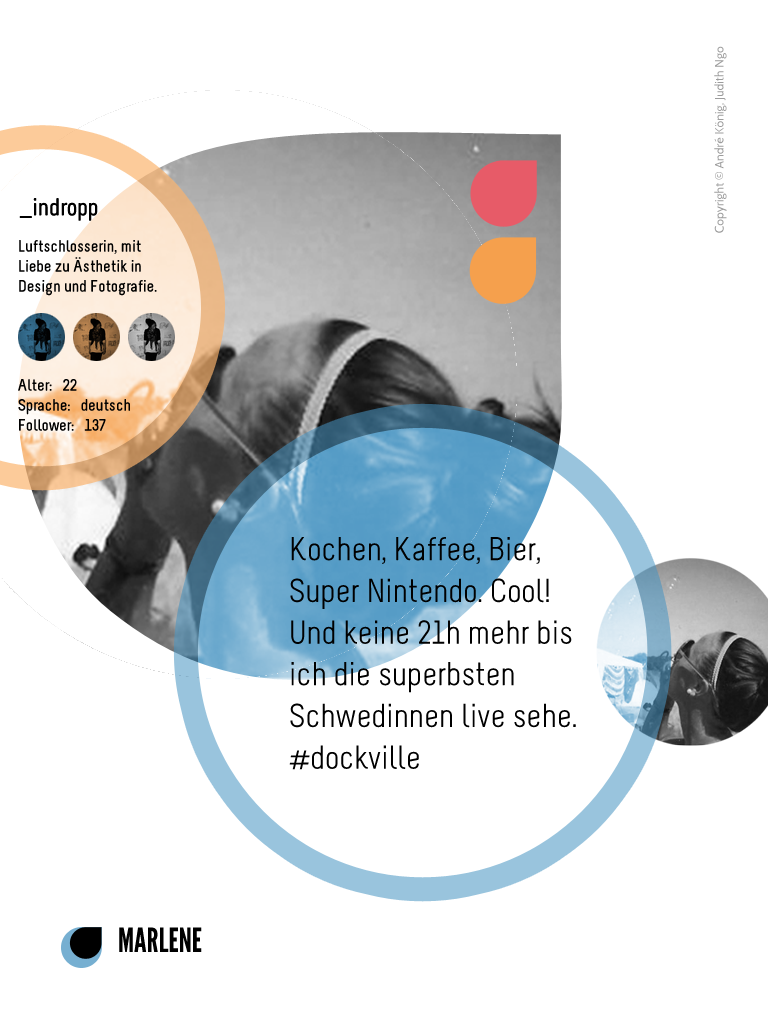
<style>
.page{position:relative;width:768px;height:1024px;background:#ffffff}
.page>*{position:absolute;margin:0}
.t1{font:12.2px "Cabin-Regular";color:#9c9c9c}
.t2{font:25px "Melbourne-Bold";color:#000000}
.t3{font:16.7px "Melbourne-Bold";color:#000000}
.t4{font:33.3px/41.7px "Melbourne";color:#000000}
.t5{font:33.3px "LeagueGothic";color:#000000}
</style>
<div class="page">
<p class="t1" style="left:714px;top:46px;width:13px;height:187px;rotate:-90deg">Copyright © André König, Judith Ngo</p>
<p class="t2" style="left:19px;top:198px;width:79px;height:23px">_indropp</p>
<p class="t3" style="left:19px;top:240px;width:138px;height:56px">Luftschlosserin, mit Liebe zu Ästhetik in Design und Fotografie.</p>
<p class="t3" style="left:18px;top:379px;width:112px;height:52px">Alter:   22<br>Sprache:   deutsch<br>Follower:   137</p>
<p class="t4" style="left:289px;top:537px;width:287px;height:233px">Kochen, Kaffee, Bier, Super Nintendo. Cool! Und keine 21h mehr bis ich die superbsten Schwedinnen live sehe. #dockville</p>
<p class="t5" style="left:119px;top:927px;width:83px;height:25px">MARLENE</p>
</div>
